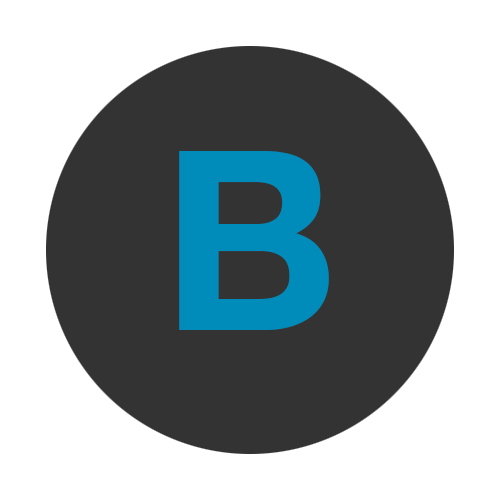
<style>
.page{position:relative;width:500px;height:500px;background:#ffffff}
.page>*{position:absolute;margin:0}
.t1{font:250px "HelveticaNeue-Bold";color:#008cba}
</style>
<div class="page">
<p class="t1" style="left:179px;top:151px;width:150px;height:179px">B</p>
</div>
